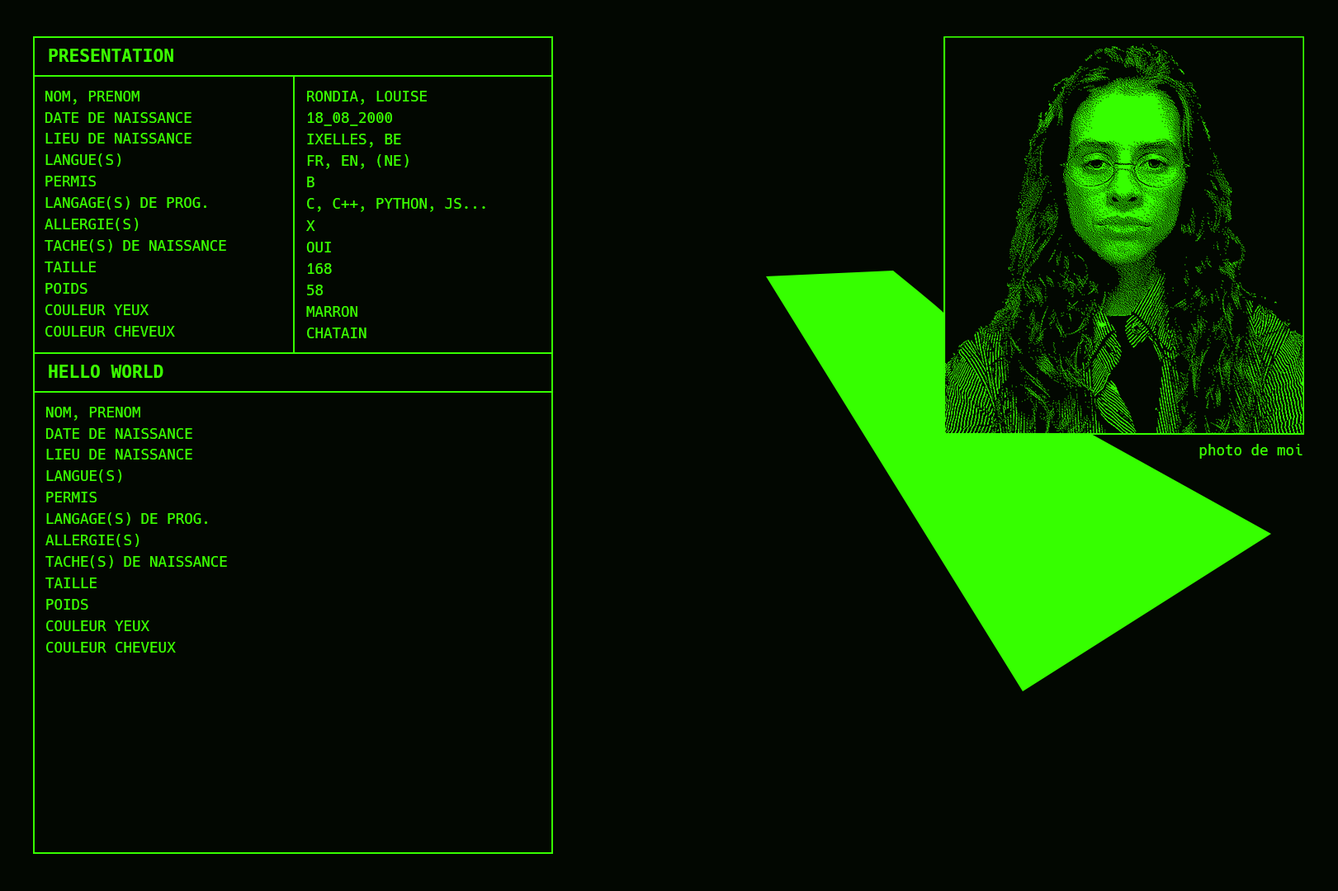
<style>
.page{position:relative;width:1338px;height:891px;background:#020701}
.page>*{position:absolute;margin:0}
.t1{font:17.5px "Hack-Bold";color:#3cff00;text-transform:uppercase}
.t2{font:14.4px/21.4px "Hack-Regular";color:#3cff00;text-transform:uppercase}
.t3{font:14.4px/21.6px "Hack-Regular";color:#3cff00;text-transform:uppercase}
.t4{font:14.4px "Hack-Regular";color:#3cff00}
</style>
<div class="page">
<p class="t1" style="left:49px;top:49px;width:124px;height:13px">Presentation</p>
<p class="t2" style="left:45px;top:91px;width:181px;height:246px">Nom, prenom<br>Date de naissance<br>Lieu de naissance<br>Langue(s)<br>Permis<br>Langage(s) de prog.<br>allergie(s)<br>Tache(s) de naissance<br>taille<br>poids<br>couleur yeux<br>couleur cheveux</p>
<p class="t3" style="left:306px;top:91px;width:179px;height:247px">Rondia, Louise<br>18_08_2000<br>Ixelles, be<br>Fr, en, (ne)<br>b<br>c, c++, python, js...<br>x<br>oui<br>168<br>58<br>marron<br>chatain</p>
<p class="t1" style="left:49px;top:365px;width:114px;height:13px">Hello world</p>
<p class="t2" style="left:45px;top:407px;width:182px;height:246px">Nom, prenom<br>Date de naissance<br>Lieu de naissance<br>Langue(s)<br>Permis<br>Langage(s) de prog.<br>allergie(s)<br>Tache(s) de naissance<br>taille<br>poids<br>couleur yeux<br>couleur cheveux</p>
<p class="t4" style="left:1199px;top:444px;width:103px;height:15px">photo de moi</p>
</div>
